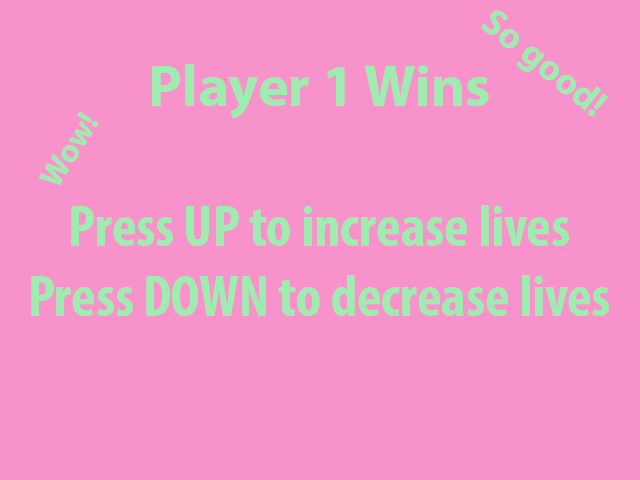
<style>
.page{position:relative;width:640px;height:480px;background:#f792cb}
.page>*{position:absolute;margin:0}
.t1{font:37.5px "MyriadPro-Bold";color:#9fecb0}
.t2{font:58.3px "MyriadPro-BoldCond";color:#9fecb0}
.t3{font:58.3px "MyriadPro-Bold";color:#9fecb0}
.t4{font:33px "MyriadPro-Bold";color:#9fecb0}
</style>
<div class="page">
<p class="t1" style="left:481px;top:10px;width:127px;height:107px;rotate:39deg">So good!</p>
<p class="t2" style="left:31px;top:64px;width:578px;height:252px;text-align:center"><span class="t3">Player 1 Wins<br><br></span>Press UP to increase lives<br>Press DOWN to decrease lives</p>
<p class="t4" style="left:38px;top:111px;width:61px;height:74px;rotate:-58deg">Wow!</p>
</div>
